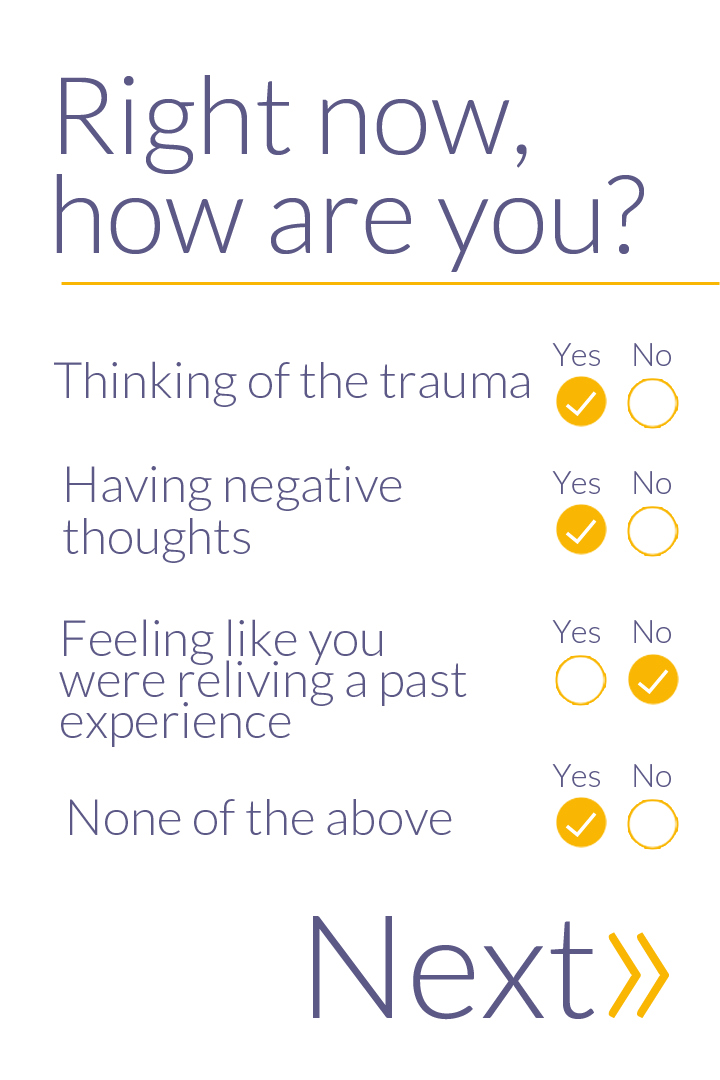
<style>
.page{position:relative;width:720px;height:1080px;background:#ffffff}
.page>*{position:absolute;margin:0}
.t1{font:108px/99px "Lato-Light";color:#5c5987}
.t2{font:32px "Lato-Light";color:#5c5987}
.t3{font:50px "Lato-Light";color:#5c5987}
.t4{font:50px/99px "Lato-Light";color:#5c5987}
.t5{font:50px/52px "Lato-Light";color:#5c5987}
.t6{font:50px/41px "Lato-Light";color:#5c5987}
.t7{font:144px "Lato-Light";color:#5c5987}
.t8{font:222px "Lato-Light";color:#f9b704}
</style>
<div class="page">
<p class="t1" style="left:56px;top:75px;width:588px;height:197px">Right now, <br>how are you?</p>
<p class="t2" style="left:552px;top:343px;width:48px;height:23px">Yes</p>
<p class="t2" style="left:634px;top:343px;width:37px;height:23px">No</p>
<p class="t3" style="left:54px;top:361px;width:475px;height:46px">Thinking of the trauma</p>
<p class="t4" style="left:63px;top:466px;width:339px;height:97px">Having negative <br><span class="t5">thoughts</span></p>
<p class="t2" style="left:552px;top:471px;width:48px;height:23px">Yes</p>
<p class="t2" style="left:634px;top:471px;width:37px;height:23px">No</p>
<p class="t6" style="left:59px;top:619px;width:408px;height:128px">Feeling like you <br>were reliving a past <br>experience</p>
<p class="t2" style="left:552px;top:620px;width:48px;height:23px">Yes</p>
<p class="t2" style="left:634px;top:620px;width:37px;height:23px">No</p>
<p class="t2" style="left:552px;top:764px;width:48px;height:23px">Yes</p>
<p class="t2" style="left:634px;top:764px;width:37px;height:23px">No</p>
<p class="t3" style="left:70px;top:799px;width:382px;height:36px">None of the above</p>
<p class="t7" style="left:313px;top:916px;width:281px;height:104px">Next</p>
<p class="t8" style="left:608px;top:932px;width:61px;height:86px">»</p>
</div>
